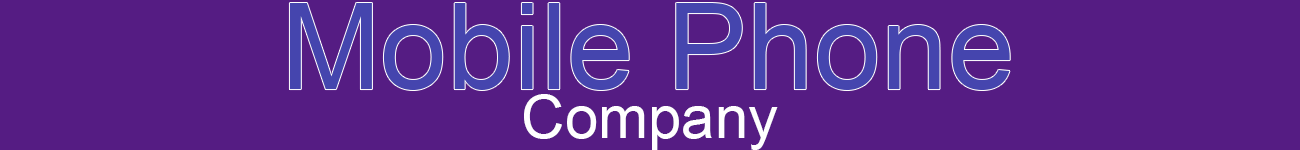
<style>
.page{position:relative;width:1300px;height:150px;background:#551c83}
.page>*{position:absolute;margin:0}
.t1{font:120px "ArialMT";color:#4545ae}
.t2{font:60px "ArialMT";color:#ffffff}
</style>
<div class="page">
<p class="t1" style="left:289px;top:3px;width:721px;height:87px">Mobile Phone</p>
<p class="t2" style="left:524px;top:94px;width:254px;height:56px">Company</p>
</div>
